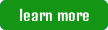
<style>
.page{position:relative;width:108px;height:30px;background:#149614}
.page>*{position:absolute;margin:0}
.t1{font:14.6px "DenkOne-Regular";color:#ffffff}
</style>
<div class="page">
<p class="t1" style="left:19px;top:8px;width:70px;height:14px">learn more</p>
</div>
